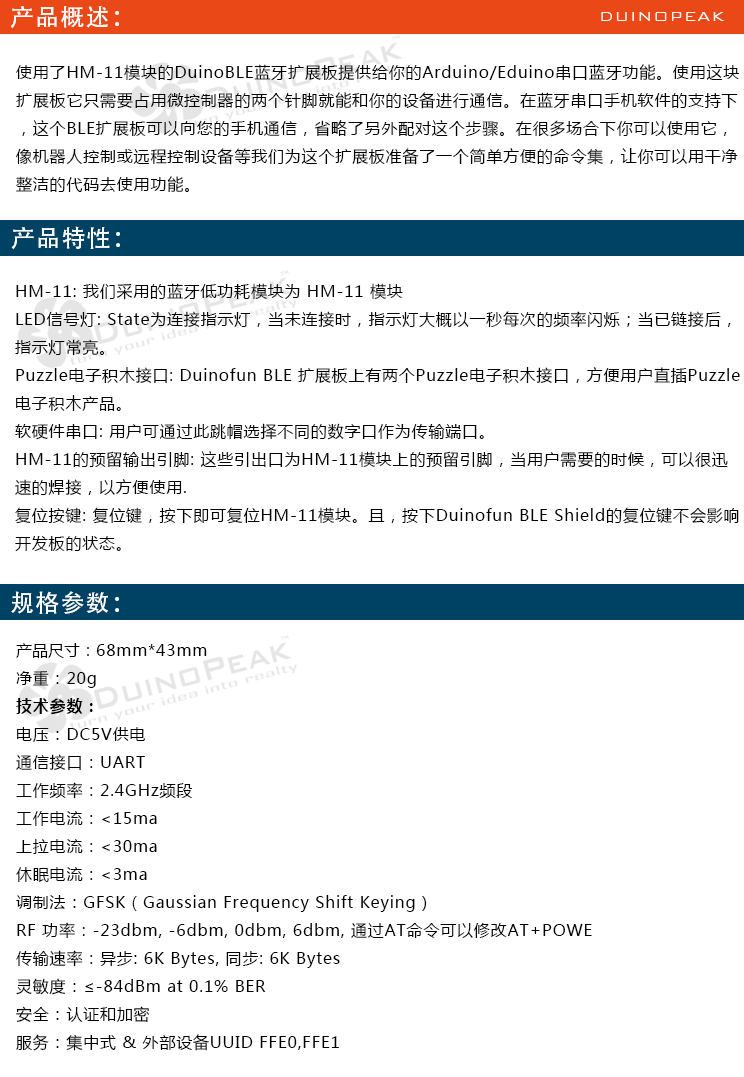
<style>
.page{position:relative;width:744px;height:1077px;background:#ffffff}
.page>*{position:absolute;margin:0}
.t1{font:24px "AdobeHeitiStd-Regular";letter-spacing:0.05em;color:#ffffff}
.t2{font:18px "BankGothicBT-Light";letter-spacing:0.05em;color:#ffffff}
.t3{font:16px "MicrosoftYaHei";letter-spacing:0.05em;color:#000000}
.t4{font:16px "MicrosoftYaHei";color:#000000}
.t5{font:16px "MicrosoftYaHei-Bold";letter-spacing:0.05em;color:#000000}
</style>
<div class="page">
<p class="t1" style="left:10px;top:6px;width:109px;height:23px">产品概述：</p>
<p class="t2" style="left:601px;top:12px;width:124px;height:9px">DUINOPEAK</p>
<p class="t3" style="left:16px;top:64px;width:723px;height:128px">使用了HM-11模块的DuinoBLE蓝牙扩展板提供给你的Arduino/Eduino串口蓝牙功能。使用这块<br>扩展板它只需要占用微控制器的两个针脚就能和你的设备进行通信。在蓝牙串口手机软件的支持下<br>，这个BLE扩展板可以向您的手机通信，省略了另外配对这个步骤。在很多场合下你可以使用它，<br>像机器人控制或远程控制设备等我们为这个扩展板准备了一个简单方便的命令集，让你可以用干净<br>整洁的代码去使用功能。</p>
<p class="t1" style="left:11px;top:226px;width:109px;height:24px">产品特性：</p>
<p class="t3" style="left:15px;top:283px;width:725px;height:268px">HM-11: 我们采用的蓝牙低功耗模块为 HM-11 模块<br>LED信号灯: State为连接指示灯，当未连接时，指示灯大概以一秒每次的频率闪烁；当已链接后，<br>指示灯常亮。<br>Puzzle电子积木接口: Duinofun BLE 扩展板上有两个Puzzle电子积木接口，方便用户直插Puzzle<br>电子积木产品。<br>软硬件串口: 用户可通过此跳帽选择不同的数字口作为传输端口。<br>HM-11的预留输出引脚: 这些引出口为HM-11模块上的预留引脚，当用户需要的时候，可以很迅<br>速的焊接，以方便使用.<br>复位按键: 复位键，按下即可复位HM-11模块。且，按下Duinofun BLE Shield的复位键不会影响<br>开发板的状态。</p>
<p class="t1" style="left:11px;top:591px;width:108px;height:23px">规格参数：</p>
<p class="t3" style="left:16px;top:643px;width:576px;height:408px"><span class="t4">产品尺寸：</span>68mm*43mm<br>净重：20g<br><span class="t5">技术参数：<br></span>电压：DC5V供电<br>通信接口：UART<br>工作频率：2.4GHz频段<br>工作电流：&lt;15ma<br>上拉电流：&lt;30ma<br>休眠电流：&lt;3ma<br>调制法：GFSK（Gaussian Frequency Shift Keying）<br>RF 功率：-23dbm, -6dbm, 0dbm, 6dbm, 通过AT命令可以修改AT+POWE<br>传输速率：异步: 6K Bytes, 同步: 6K Bytes<br>灵敏度：≤-84dBm at 0.1% BER<br>安全：认证和加密<br>服务：集中式 &amp; 外部设备UUID FFE0,FFE1</p>
</div>
